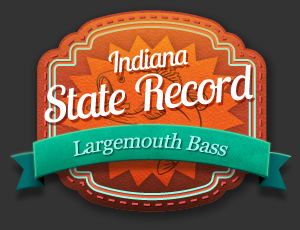
<style>
.page{position:relative;width:300px;height:230px;background:#333333}
.page>*{position:absolute;margin:0}
.t1{font:28.6px "LobsterTwo";letter-spacing:-0.03em;color:#ffffff;font-style:italic}
.t2{font:48.6px "LobsterTwo";letter-spacing:-0.03em;color:#ffffff;font-style:italic}
.t3{font:20.5px "Georgia";letter-spacing:-0.03em;color:#99ffff;font-style:italic}
</style>
<div class="page">
<p class="t1" style="left:108px;top:48px;width:80px;height:25px;rotate:-7deg">Indiana</p>
<p class="t2" style="left:44px;top:64px;width:209px;height:59px;rotate:-7deg">State Record</p>
<p class="t3" style="left:73px;top:133px;width:155px;height:24px;opacity:0.85">Largemouth Bass</p>
</div>
